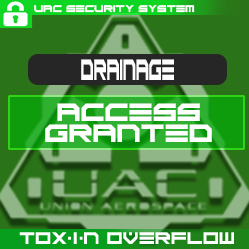
<style>
.page{position:relative;width:249px;height:249px;background:#2b7318}
.page>*{position:absolute;margin:0}
.t1{font:6.8px "ScifiAdventure";color:#ffffff}
.t2{font:20.5px "ScifiAdventure";color:#ffffff;scale:0.46 1}
.t3{font:17.5px "ScifiAdventure";color:#ffffff}
</style>
<div class="page">
<p class="t1" style="left:34px;top:5px;width:161px;height:8px">UAC SECURITY SYSTEM</p>
<p class="t2" style="left:81px;top:59px;width:93px;height:21px">DRAINAGE</p>
<p class="t3" style="left:45px;top:103px;width:167px;height:39px;text-align:center">ACCESS <br>GRANTED</p>
</div>
